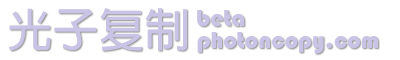
<style>
.page{position:relative;width:400px;height:60px;background:#ffffff}
.page>*{position:absolute;margin:0}
.t1{font:45.6px "AdobeFanHeitiStd-Bold";color:#c9c3e6}
.t2{font:24px "Bauhaus93";color:#c9c3e6}
</style>
<div class="page">
<p class="t1" style="left:8px;top:8px;width:179px;height:43px">光子复制</p>
<p class="t2" style="left:197px;top:10px;width:48px;height:17px">beta</p>
<p class="t2" style="left:197px;top:32px;width:181px;height:22px">photoncopy.com</p>
</div>
